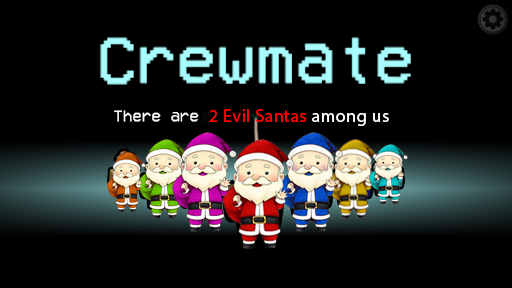
<style>
.page{position:relative;width:512px;height:288px;background:#000000}
.page>*{position:absolute;margin:0}
.t1{font:18px "MyriadPro-Regular";letter-spacing:0.025em;color:#ff0000}
.t2{font:18px "MyriadPro-Regular";letter-spacing:0.025em;color:#ffffff}
</style>
<div class="page">
<p class="t1" style="left:209px;top:109px;width:180px;height:17px">2 Evil Santas <span class="t2">among us</span></p>
</div>
